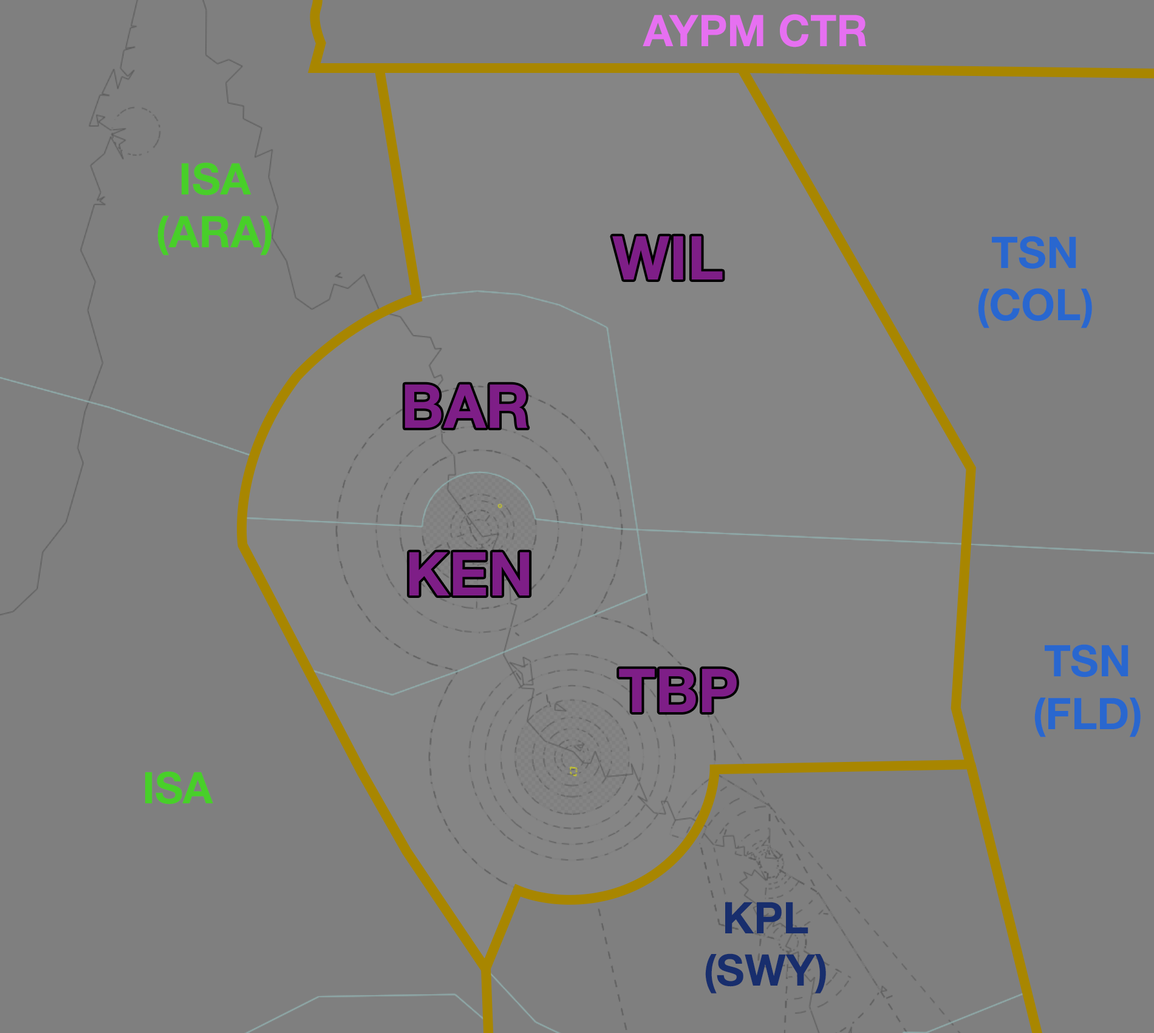
<style>
.page{position:relative;width:1154px;height:1033px;background:#7f7f7f}
.page>*{position:absolute;margin:0}
.t1{font:43.7px "HelveticaNeue-Bold";color:#e670f1}
.t2{font:43.7px "HelveticaNeue-Bold";color:#48cf29}
.t3{font:60.8px "HelveticaNeue-Bold";color:#7e1e87}
.t4{font:43.7px "HelveticaNeue-Bold";color:#2967cf}
.t5{font:43.7px "HelveticaNeue-Bold";color:#182e6d}
</style>
<div class="page">
<p class="t1" style="left:643px;top:14px;width:224px;height:33px">AYPM CTR</p>
<p class="t2" style="left:157px;top:162px;width:115px;height:93px;text-align:center">ISA<br>(ARA)</p>
<p class="t3" style="left:612px;top:236px;width:111px;height:43px">WIL</p>
<p class="t4" style="left:978px;top:236px;width:114px;height:92px;text-align:center">TSN<br>(COL)</p>
<p class="t3" style="left:405px;top:384px;width:123px;height:44px">BAR</p>
<p class="t3" style="left:410px;top:552px;width:120px;height:43px">KEN</p>
<p class="t4" style="left:1035px;top:644px;width:106px;height:93px;text-align:center">TSN<br>(FLD)</p>
<p class="t3" style="left:619px;top:668px;width:118px;height:44px">TBP</p>
<p class="t2" style="left:145px;top:771px;width:68px;height:33px">ISA</p>
<p class="t5" style="left:705px;top:902px;width:121px;height:91px;text-align:center">KPL<br>(SWY)</p>
</div>
